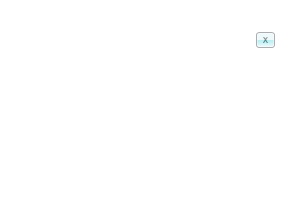
<style>
.page{position:relative;width:300px;height:200px;background:#ffffff}
.page>*{position:absolute;margin:0}
.t1{font:9px "TrebuchetMS"}
</style>
<div class="page">
<p class="t1" style="left:263px;top:37px;width:5px;height:6px">X</p>
</div>
